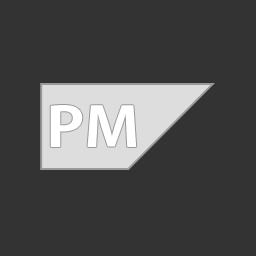
<style>
.page{position:relative;width:256px;height:256px;background:#333333}
.page>*{position:absolute;margin:0}
.t1{font:54.2px "AdobeGothicStd-Bold";color:#ffffff;scale:1.18 1}
</style>
<div class="page">
<p class="t1" style="left:50px;top:105px;width:87px;height:42px">PM</p>
</div>
